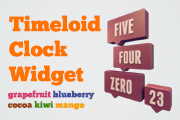
<style>
.page{position:relative;width:180px;height:120px}
.page>*{position:absolute;margin:0}
.t1{font:20.8px "ChunkFive-Roman";color:#ff7200}
.t2{font:8.7px "ChunkFive-Roman";color:#d64270}
.t3{font:8.7px "ChunkFive-Roman";color:#48539c}
.t4{font:8.7px "ChunkFive-Roman";color:#98491c}
.t5{font:8.7px "ChunkFive-Roman";color:#428c07}
.t6{font:8.7px "ChunkFive-Roman";color:#f6a100}
</style>
<div class="page">
<p class="t1" style="left:8px;top:15px;width:93px;height:71px">Timeloid<br>Clock<br>Widget</p>
<p class="t2" style="left:8px;top:90px;width:87px;height:20px">grapefruit <span class="t3">blueberry<br></span><span class="t4">cocoa </span><span class="t5">kiwi </span><span class="t6">mango</span></p>
</div>
